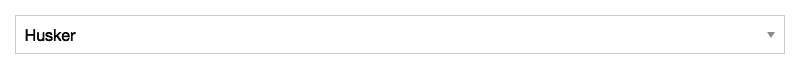
<style>
.page{position:relative;width:800px;height:69px;background:#ffffff}
.page>*{position:absolute;margin:0}
.t1{font:12px "MyriadPro-Regular";color:#000000}
</style>
<div class="page">
<p class="t1" style="left:25px;top:29px;width:51px;height:13px">Husker</p>
</div>
